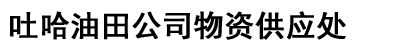
<style>
.page{position:relative;width:400px;height:50px;background:#ffffff}
.page>*{position:absolute;margin:0}
.t1{font:30px "SimHei";color:#000000;font-weight:bold}
</style>
<div class="page">
<p class="t1" style="left:10px;top:11px;width:336px;height:29px">吐哈油田公司物资供应处</p>
</div>
